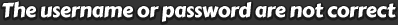
<style>
.page{position:relative;width:398px;height:25px;background:#333333}
.page>*{position:absolute;margin:0}
.t1{font:20px "CarterOne";letter-spacing:-0.02em;color:#ffffff}
</style>
<div class="page">
<p class="t1" style="left:2px;top:1px;width:394px;height:21px">The username or password are not correct</p>
</div>
